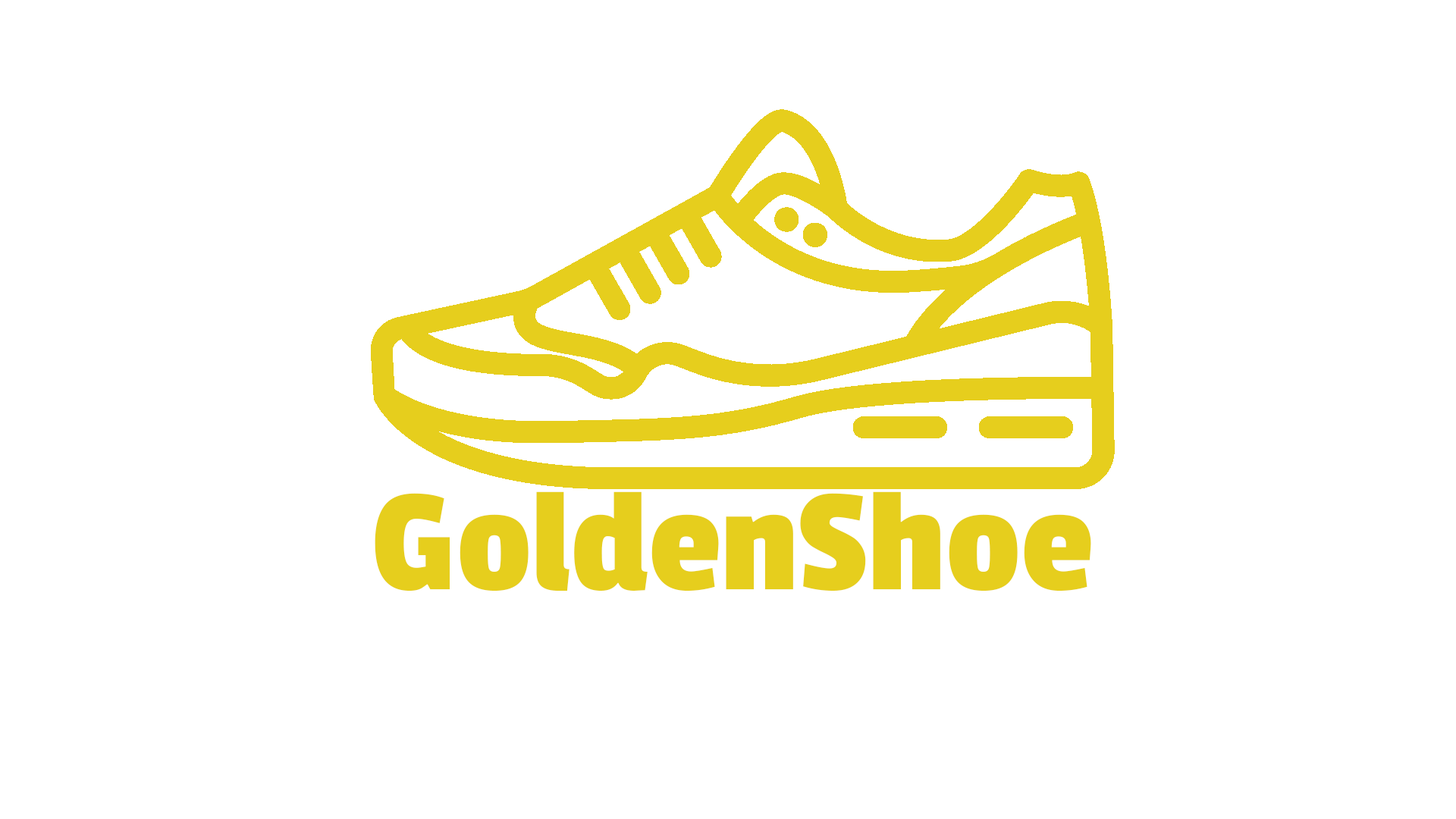
<style>
.page{position:relative;width:1456px;height:819px;background:#ffffff}
.page>*{position:absolute;margin:0}
.t1{font:151.7px "PassionOne-Regular";color:#e6ce1d;scale:1.09 1}
</style>
<div class="page">
<p class="t1" style="left:375px;top:491px;width:716px;height:100px">GoldenShoe</p>
</div>
